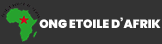
<style>
.page{position:relative;width:162px;height:44px;background:#333333}
.page>*{position:absolute;margin:0}
.t1{font:12px "Poppins-Black";color:#ffffff}
</style>
<div class="page">
<p class="t1" style="left:39px;top:17px;width:122px;height:11px">ONG ETOILE D’AFRIK</p>
</div>
